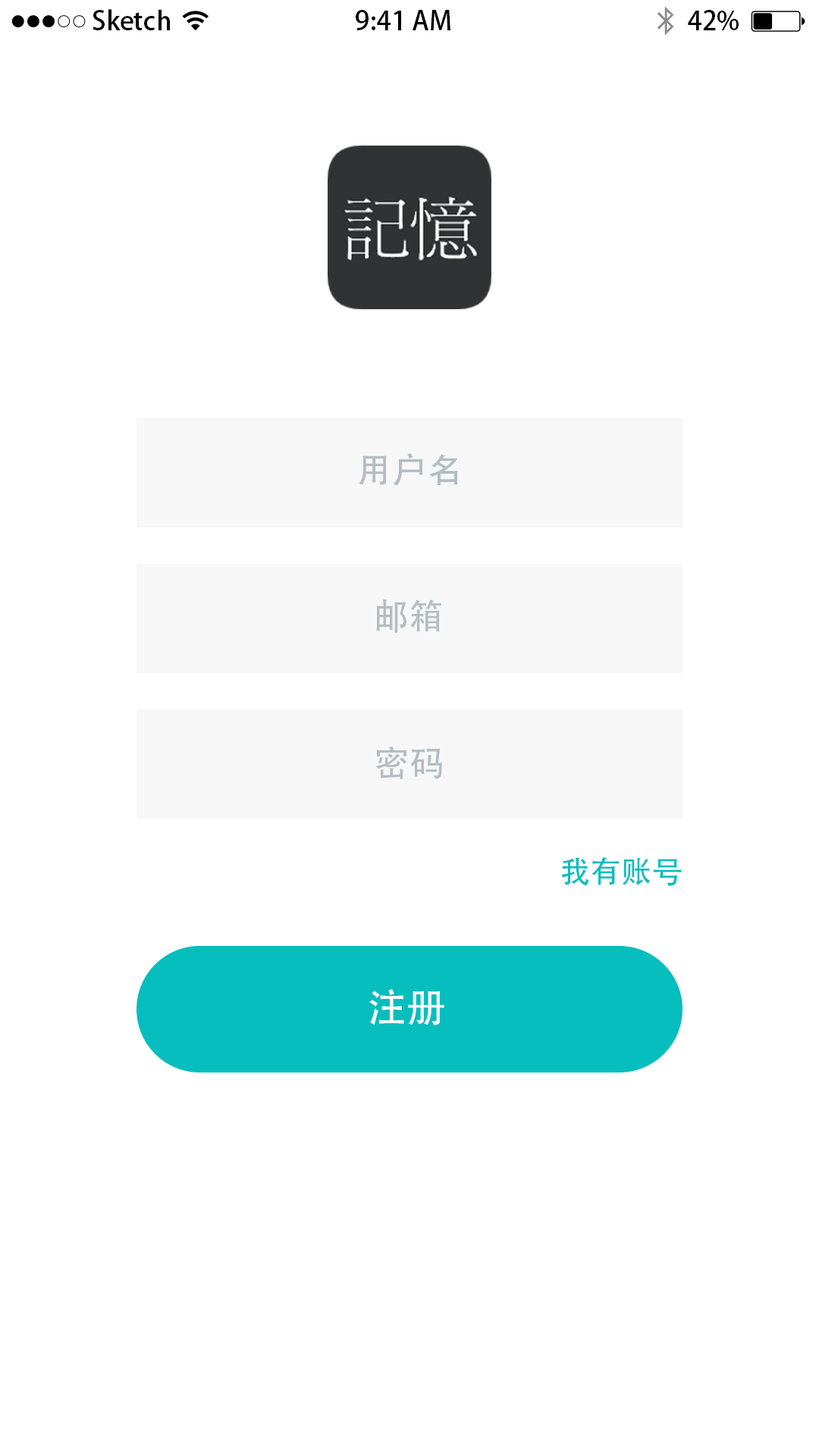
<style>
.page{position:relative;width:819px;height:1456px;background:#ffffff}
.page>*{position:absolute;margin:0}
.t1{font:26.2px "AdobeHeitiStd-Regular";color:#000000}
.t2{font:34.9px "AdobeHeitiStd-Regular";letter-spacing:0.015em;color:#b3bdc2}
.t3{font:34.9px "AdobeHeitiStd-Regular";color:#b3bdc2}
.t4{font:30.6px "AdobeHeitiStd-Regular";letter-spacing:0.01em;color:#06bebd}
.t5{font:39.3px "AdobeHeitiStd-Regular";letter-spacing:-0.005em;color:#ffffff}
</style>
<div class="page">
<p class="t1" style="left:92px;top:9px;width:78px;height:21px">Sketch</p>
<p class="t1" style="left:356px;top:10px;width:94px;height:20px">9:41 AM</p>
<p class="t1" style="left:688px;top:10px;width:50px;height:21px">42%</p>
<p class="t2" style="left:359px;top:453px;width:99px;height:33px">用户名</p>
<p class="t3" style="left:376px;top:600px;width:65px;height:33px">邮箱</p>
<p class="t2" style="left:375px;top:747px;width:67px;height:32px">密码</p>
<p class="t4" style="left:561px;top:857px;width:121px;height:29px">我有账号</p>
<p class="t5" style="left:369px;top:989px;width:75px;height:37px">注册</p>
</div>
